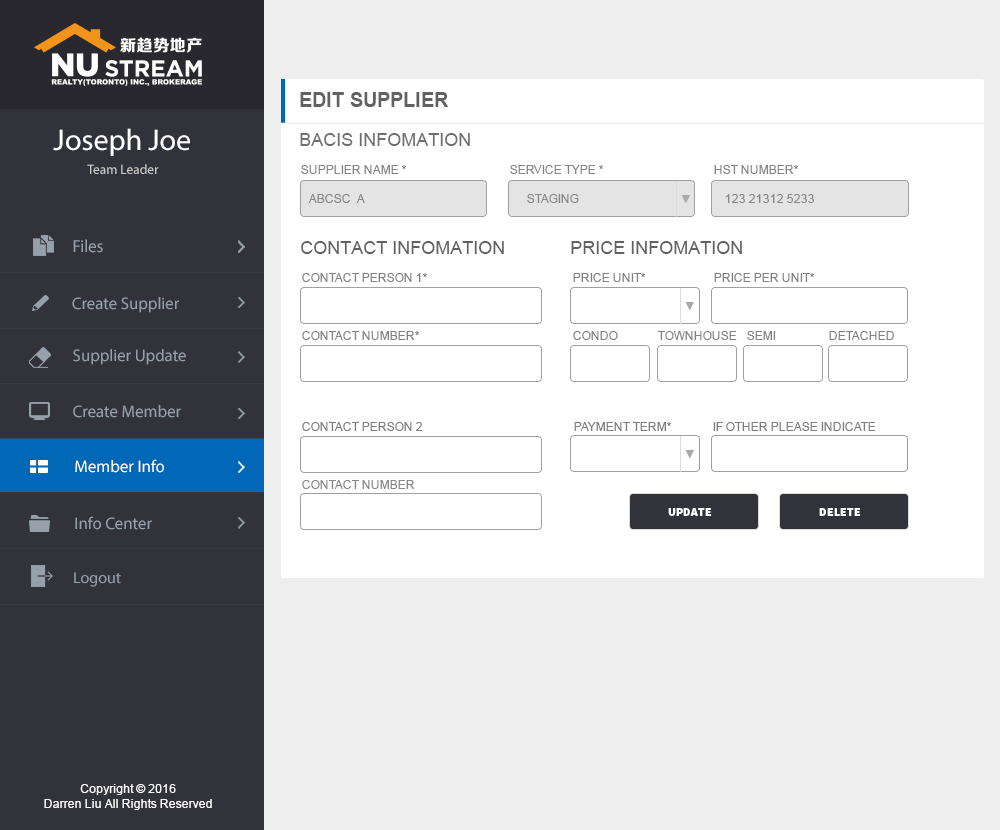
<style>
.page{position:relative;width:1000px;height:830px;background:#ffffff}
.page>*{position:absolute;margin:0}
.t1{font:20px "Arial-BoldMT";color:#616161}
.t2{font:30px "MyriadPro-Regular";color:#ffffff}
.t3{font:18px "ArialMT";color:#6e6e6e}
.t4{font:13.4px "MyriadPro-Regular";color:#cccccc}
.t5{font:12px "ArialMT";color:#868686}
.t6{font:10px "AdobeHeitiStd-Regular";color:#a9a9a9}
.t7{font:17.6px "MyriadPro-Regular";color:#95a0aa;scale:0.96 1}
.t8{font:18px "ArialMT";color:#616161}
.t9{font:12px "ArialMT";color:#828282}
.t10{font:16.8px "MyriadPro-Regular";color:#95a0aa}
.t11{font:12px "ArialMT";color:#7e7e7e}
.t12{font:16.8px "MyriadPro-Regular";color:#ffffff}
.t13{font:12px "SourceSansPro-Black";color:#ffffff}
.t14{font:16px "MyriadPro-Regular";color:#95a0aa}
.t15{font:12px "ArialMT";color:#ffffff}
</style>
<div class="page">
<p class="t1" style="left:300px;top:92px;width:149px;height:15px">EDIT SUPPLIER</p>
<p class="t2" style="left:53px;top:128px;width:137px;height:28px">Joseph Joe</p>
<p class="t3" style="left:300px;top:133px;width:170px;height:13px">BACIS INFOMATION</p>
<p class="t4" style="left:87px;top:164px;width:72px;height:10px">Team Leader</p>
<p class="t5" style="left:301px;top:165px;width:105px;height:9px">SUPPLIER NAME *</p>
<p class="t5" style="left:510px;top:165px;width:93px;height:9px">SERVICE TYPE *</p>
<p class="t5" style="left:714px;top:165px;width:84px;height:9px">HST NUMBER*</p>
<p class="t5" style="left:308px;top:194px;width:57px;height:9px">ABCSC  A</p>
<p class="t5" style="left:527px;top:194px;width:52px;height:9px">STAGING</p>
<p class="t6" style="left:681px;top:195px;width:9px;height:9px">▼</p>
<p class="t5" style="left:725px;top:194px;width:89px;height:9px">123 21312 5233</p>
<p class="t7" style="left:73px;top:239px;width:30px;height:14px">Files</p>
<p class="t8" style="left:301px;top:241px;width:203px;height:13px">CONTACT INFOMATION</p>
<p class="t8" style="left:571px;top:241px;width:171px;height:13px">PRICE INFOMATION</p>
<p class="t9" style="left:302px;top:273px;width:125px;height:9px">CONTACT PERSON 1*</p>
<p class="t9" style="left:573px;top:273px;width:72px;height:9px">PRICE UNIT*</p>
<p class="t9" style="left:714px;top:273px;width:100px;height:9px">PRICE PER UNIT*</p>
<p class="t10" style="left:72px;top:297px;width:107px;height:16px">Create Supplier</p>
<p class="t6" style="left:685px;top:302px;width:9px;height:9px">▼</p>
<p class="t9" style="left:302px;top:331px;width:117px;height:9px">CONTACT NUMBER*</p>
<p class="t9" style="left:573px;top:331px;width:45px;height:9px">CONDO</p>
<p class="t9" style="left:657px;top:331px;width:80px;height:9px">TOWNHOUSE</p>
<p class="t9" style="left:747px;top:331px;width:29px;height:9px">SEMI</p>
<p class="t9" style="left:829px;top:331px;width:65px;height:9px">DETACHED</p>
<p class="t10" style="left:73px;top:349px;width:113px;height:16px">Supplier Update</p>
<p class="t10" style="left:73px;top:405px;width:108px;height:13px">Create Member</p>
<p class="t11" style="left:302px;top:422px;width:120px;height:9px">CONTACT PERSON 2</p>
<p class="t11" style="left:574px;top:422px;width:97px;height:9px">PAYMENT TERM*</p>
<p class="t11" style="left:713px;top:422px;width:163px;height:9px">IF OTHER PLEASE INDICATE</p>
<p class="t12" style="left:75px;top:459px;width:89px;height:14px">Member Info</p>
<p class="t6" style="left:685px;top:450px;width:9px;height:9px">▼</p>
<p class="t5" style="left:302px;top:480px;width:113px;height:9px">CONTACT NUMBER</p>
<p class="t13" style="left:668px;top:508px;width:44px;height:8px">UPDATE</p>
<p class="t13" style="left:819px;top:508px;width:42px;height:8px">DELETE</p>
<p class="t10" style="left:75px;top:516px;width:77px;height:14px">Info Center</p>
<p class="t14" style="left:74px;top:572px;width:47px;height:15px">Logout</p>
<p class="t15" style="left:44px;top:784px;width:168px;height:26px;text-align:center">Copyright © 2016<br>Darren Liu All Rights Reserved</p>
</div>
